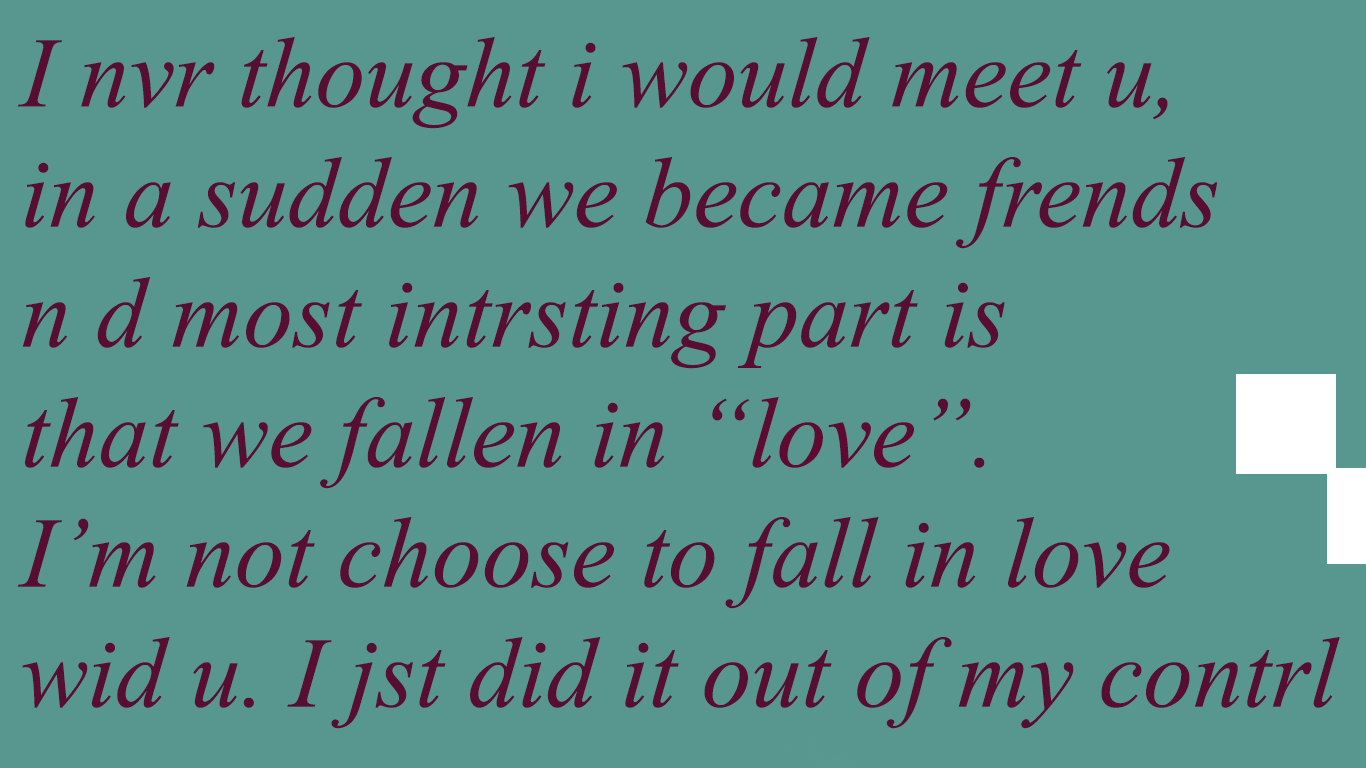
<style>
.page{position:relative;width:1366px;height:768px;background:#589790}
.page>*{position:absolute;margin:0}
.t1{font:100px "TimesNewRomanPS-ItalicMT";color:#580d32}
.t2{font:100px "TimesNewRomanPS-ItalicMT";color:#5e0a33}
</style>
<div class="page">
<p class="t1" style="left:17px;top:37px;width:1323px;height:692px">I nvr thought i would meet u,<br>in a sudden we became frends <br>n d most intrsting part is <br>that we fallen in “<span class="t2">love</span>”.<br>I’m not choose to fall in love<br>wid u. I jst did it out of my contrl</p>
</div>
